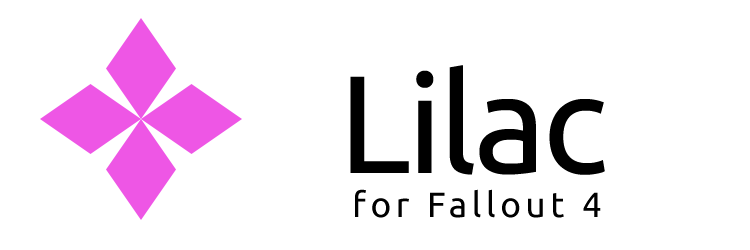
<style>
.page{position:relative;width:750px;height:250px;background:#ffffff}
.page>*{position:absolute;margin:0}
.t1{font:139px "Ubuntu";letter-spacing:-0.025em;color:#000000}
.t2{font:35px "Ubuntu";letter-spacing:0.135em;color:#000000}
</style>
<div class="page">
<p class="t1" style="left:350px;top:65px;width:255px;height:110px">Lilac</p>
<p class="t2" style="left:355px;top:189px;width:246px;height:29px">for Fallout 4</p>
</div>
